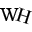
<style>
.page{position:relative;width:32px;height:32px;background:#ffffff}
.page>*{position:absolute;margin:0}
.t1{font:20px "TimesNewRomanPSMT";color:#000000}
</style>
<div class="page">
<p class="t1" style="left:0px;top:8px;width:19px;height:13px">W</p>
<p class="t1" style="left:15px;top:7px;width:18px;height:18px;rotate:18deg">H</p>
</div>
